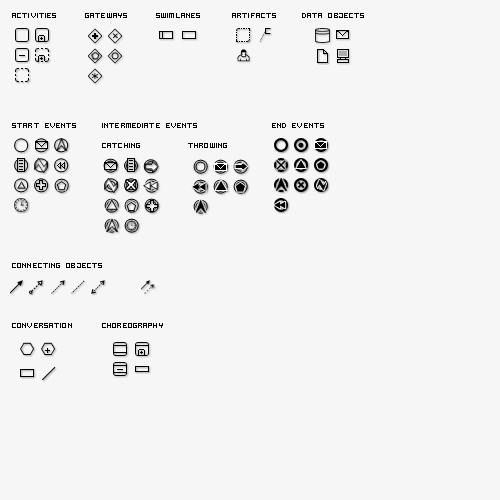
<style>
.page{position:relative;width:500px;height:500px;background:#f6f6f6}
.page>*{position:absolute;margin:0}
.t1{font:9px "Bit3";color:#000000}
</style>
<div class="page">
<p class="t1" style="left:12px;top:13px;width:44px;height:5px">Activities</p>
<p class="t1" style="left:85px;top:13px;width:42px;height:5px">Gateways</p>
<p class="t1" style="left:156px;top:13px;width:44px;height:5px">Swimlanes</p>
<p class="t1" style="left:232px;top:13px;width:44px;height:5px">Artifacts</p>
<p class="t1" style="left:302px;top:13px;width:62px;height:5px">Data Objects</p>
<p class="t1" style="left:12px;top:123px;width:64px;height:5px">Start Events</p>
<p class="t1" style="left:102px;top:123px;width:95px;height:5px">Intermediate Events</p>
<p class="t1" style="left:272px;top:123px;width:52px;height:5px">End Events</p>
<p class="t1" style="left:102px;top:143px;width:38px;height:5px">Catching</p>
<p class="t1" style="left:188px;top:143px;width:39px;height:5px">Throwing</p>
<p class="t1" style="left:12px;top:263px;width:90px;height:5px">Connecting Objects</p>
<p class="t1" style="left:12px;top:323px;width:60px;height:5px">Conversation</p>
<p class="t1" style="left:102px;top:323px;width:61px;height:5px">Choreography</p>
</div>
